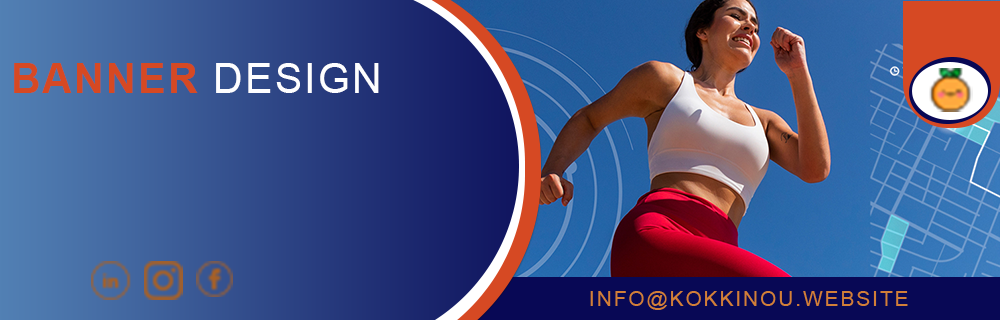
<style>
.page{position:relative;width:1000px;height:320px}
.page>*{position:absolute;margin:0}
.t1{font:41.3px "Arial-BoldMT";letter-spacing:0.05em;color:#d64923;text-transform:uppercase}
.t2{font:41.3px "ArialMT";letter-spacing:0.05em;color:#fefeff;text-transform:uppercase}
.t3{font:20.7px "ArialMT";letter-spacing:0.1em;color:#d27f38;text-transform:uppercase}
</style>
<div class="page">
<p class="t1" style="left:14px;top:63px;width:365px;height:30px">BANNER <span class="t2">DESIGN</span></p>
<p class="t3" style="left:590px;top:291px;width:318px;height:19px">info@kokkinou.website</p>
</div>
